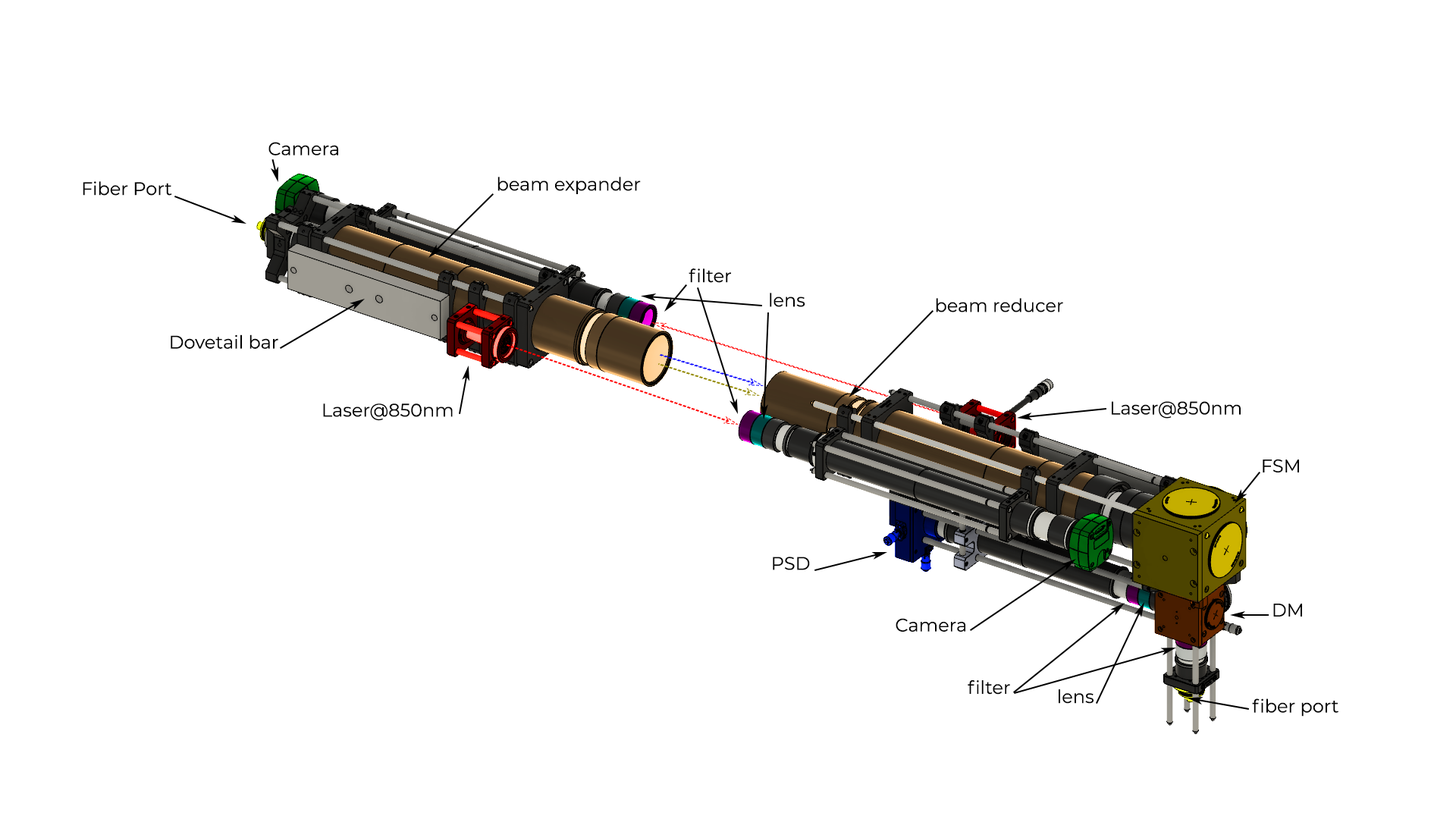
<style>
.page{position:relative;width:1456px;height:819px;background:#ffffff}
.page>*{position:absolute;margin:0}
.t1{font:18.2px "Montserrat-Regular";color:#000000}
</style>
<div class="page">
<p class="t1" style="left:268px;top:142px;width:70px;height:13px">Camera</p>
<p class="t1" style="left:83px;top:181px;width:89px;height:15px">Fiber Port</p>
<p class="t1" style="left:497px;top:177px;width:144px;height:17px">beam expander</p>
<p class="t1" style="left:689px;top:268px;width:42px;height:15px">filter</p>
<p class="t1" style="left:770px;top:293px;width:35px;height:14px">lens</p>
<p class="t1" style="left:936px;top:298px;width:127px;height:14px">beam reducer</p>
<p class="t1" style="left:171px;top:334px;width:107px;height:15px">Dovetail bar</p>
<p class="t1" style="left:1112px;top:401px;width:129px;height:18px">Laser@850nm</p>
<p class="t1" style="left:323px;top:403px;width:130px;height:18px">Laser@850nm</p>
<p class="t1" style="left:1263px;top:459px;width:36px;height:13px">FSM</p>
<p class="t1" style="left:773px;top:557px;width:37px;height:13px">PSD</p>
<p class="t1" style="left:1273px;top:604px;width:29px;height:13px">DM</p>
<p class="t1" style="left:896px;top:618px;width:69px;height:14px">Camera</p>
<p class="t1" style="left:968px;top:680px;width:42px;height:15px">filter</p>
<p class="t1" style="left:1059px;top:689px;width:35px;height:15px">lens</p>
<p class="t1" style="left:1252px;top:698px;width:86px;height:19px">fiber port</p>
</div>
